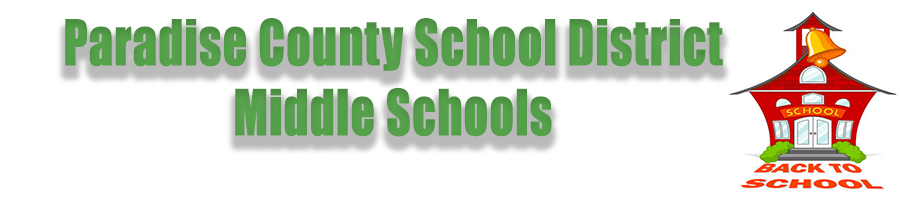
<style>
.page{position:relative;width:900px;height:200px;background:#ffffff}
.page>*{position:absolute;margin:0}
.t1{font:58.2px "Impact";color:#57a54c;font-weight:bold;scale:0.82 1}
</style>
<div class="page">
<p class="t1" style="left:65px;top:18px;width:658px;height:119px;text-align:center">Paradise County School District<br>Middle Schools</p>
</div>
